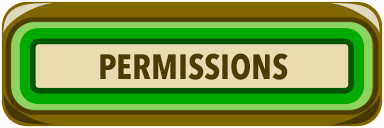
<style>
.page{position:relative;width:384px;height:128px;background:#e9ddaf}
.page>*{position:absolute;margin:0}
.t1{font:35px "AvenirNextCondensed-Bold";color:#4c3c00}
</style>
<div class="page">
<p class="t1" style="left:100px;top:53px;width:188px;height:27px">PERMISSIONS</p>
</div>
